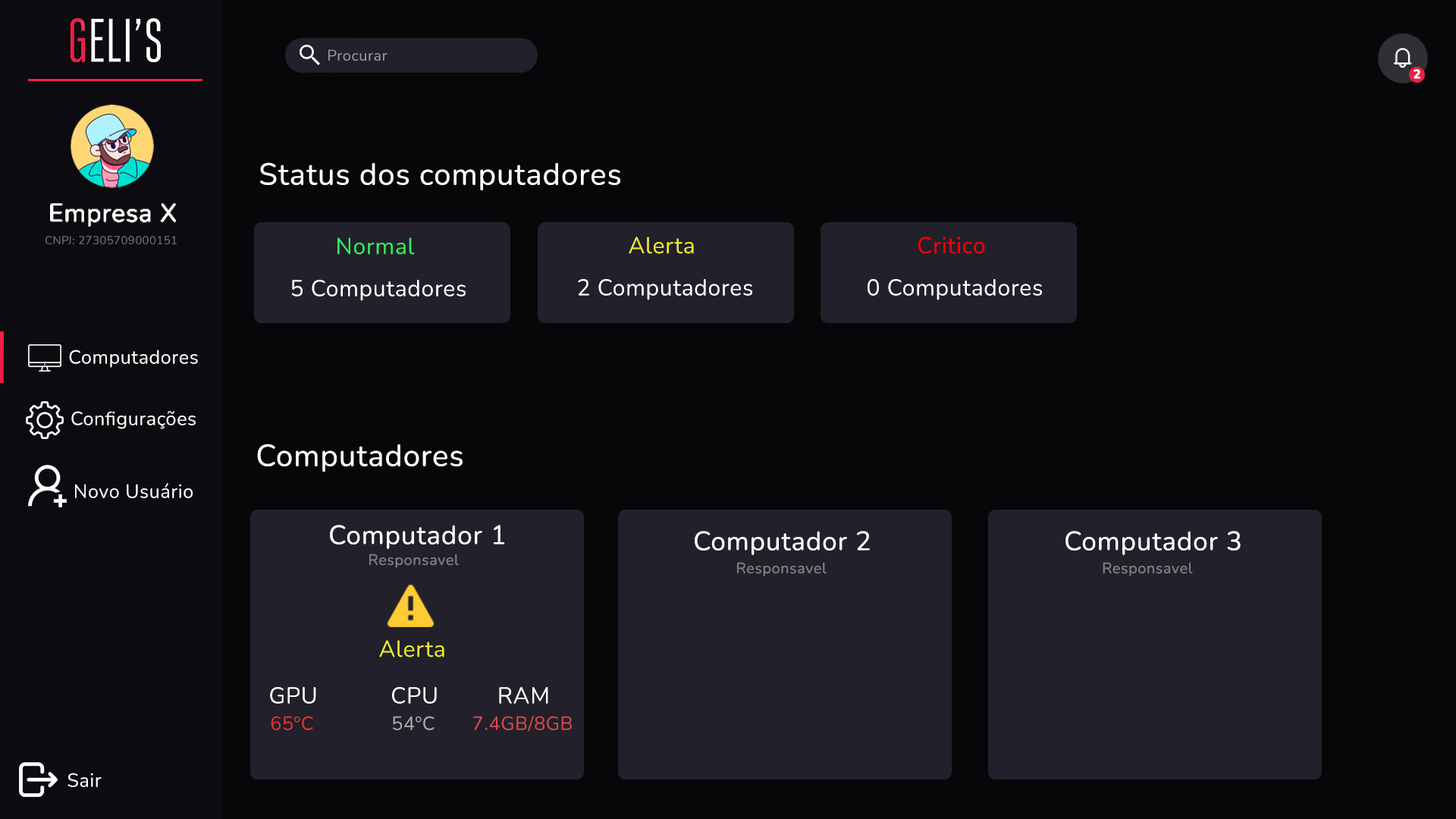
<style>
.page{position:relative;width:1456px;height:819px;background:#070709}
.page>*{position:absolute;margin:0}
.t1{font:15.2px "Nunito-Regular";letter-spacing:0.025em;color:#9b9b9b}
.t2{font:30.3px "Nunito-Regular";letter-spacing:0.025em;color:#ffffff}
.t3{font:11.4px "Nunito-Regular";letter-spacing:0.025em;color:#727272}
.t4{font:22.7px "Nunito-Regular";letter-spacing:0.025em;color:#34ec63}
.t5{font:22.7px "Nunito-Regular";letter-spacing:0.025em;color:#ecea34}
.t6{font:22.7px "Nunito-Regular";letter-spacing:0.025em;color:#ff0000}
.t7{font:22.7px "Nunito-Regular";letter-spacing:0.025em;color:#ffffff}
.t8{font:19px "Nunito-Regular";letter-spacing:0.025em;color:#ffffff}
.t9{font:26.5px "Nunito-Regular";letter-spacing:0.025em;color:#ffffff}
.t10{font:15.2px "Nunito-Regular";letter-spacing:0.025em;color:#807e7e}
.t11{font:19px "Nunito-Regular";letter-spacing:0.025em;color:#dd3636}
.t12{font:19px "Nunito-Regular";letter-spacing:0.025em;color:#aaaaaa}
.t13{font:19px "Nunito-Regular";letter-spacing:0.025em;color:#d64b4b}
</style>
<div class="page">
<p class="t1" style="left:328px;top:49px;width:60px;height:12px">Procurar</p>
<p class="t2" style="left:260px;top:162px;width:360px;height:28px">Status dos computadores</p>
<p class="t3" style="left:45px;top:236px;width:132px;height:9px">CNPJ: 27305709000151</p>
<p class="t4" style="left:337px;top:237px;width:78px;height:18px">Normal</p>
<p class="t5" style="left:629px;top:237px;width:65px;height:17px">Alerta</p>
<p class="t6" style="left:918px;top:237px;width:67px;height:17px">Critico</p>
<p class="t7" style="left:292px;top:280px;width:174px;height:21px">5 Computadores</p>
<p class="t7" style="left:578px;top:279px;width:174px;height:21px">2 Computadores</p>
<p class="t7" style="left:868px;top:279px;width:174px;height:21px">0 Computadores</p>
<p class="t8" style="left:69px;top:350px;width:129px;height:18px">Computadores</p>
<p class="t8" style="left:71px;top:411px;width:125px;height:18px">Configurações</p>
<p class="t2" style="left:257px;top:444px;width:206px;height:28px">Computadores</p>
<p class="t8" style="left:75px;top:483px;width:118px;height:15px">Novo Usuário</p>
<p class="t9" style="left:330px;top:525px;width:175px;height:25px">Computador 1</p>
<p class="t9" style="left:695px;top:531px;width:175px;height:25px">Computador 2</p>
<p class="t9" style="left:1065px;top:531px;width:176px;height:25px">Computador 3</p>
<p class="t10" style="left:369px;top:554px;width:90px;height:14px">Responsavel</p>
<p class="t10" style="left:737px;top:562px;width:90px;height:14px">Responsavel</p>
<p class="t10" style="left:1103px;top:562px;width:90px;height:14px">Responsavel</p>
<p class="t5" style="left:379px;top:640px;width:65px;height:17px">Alerta</p>
<p class="t7" style="left:270px;top:687px;width:46px;height:17px">GPU</p>
<p class="t7" style="left:392px;top:687px;width:45px;height:17px">CPU</p>
<p class="t7" style="left:499px;top:687px;width:49px;height:17px">RAM</p>
<p class="t11" style="left:271px;top:716px;width:42px;height:14px">65ºC</p>
<p class="t12" style="left:393px;top:716px;width:42px;height:14px">54ºC</p>
<p class="t13" style="left:473px;top:715px;width:99px;height:16px">7.4GB/8GB</p>
<p class="t8" style="left:67px;top:773px;width:35px;height:14px">Sair</p>
</div>
